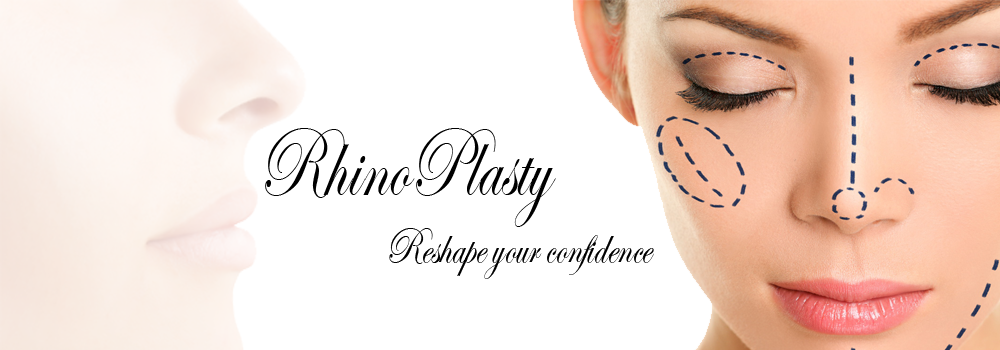
<style>
.page{position:relative;width:1000px;height:350px;background:#ffffff}
.page>*{position:absolute;margin:0}
.t1{font:100.9px "EdwardianScriptITC";color:#000000;scale:0.72 1}
.t2{font:52.1px "EdwardianScriptITC";color:#000000;scale:0.75 1}
</style>
<div class="page">
<p class="t1" style="left:265px;top:128px;width:291px;height:99px">RhinoPlasty</p>
<p class="t2" style="left:389px;top:228px;width:265px;height:51px">Reshape your confidence</p>
</div>
